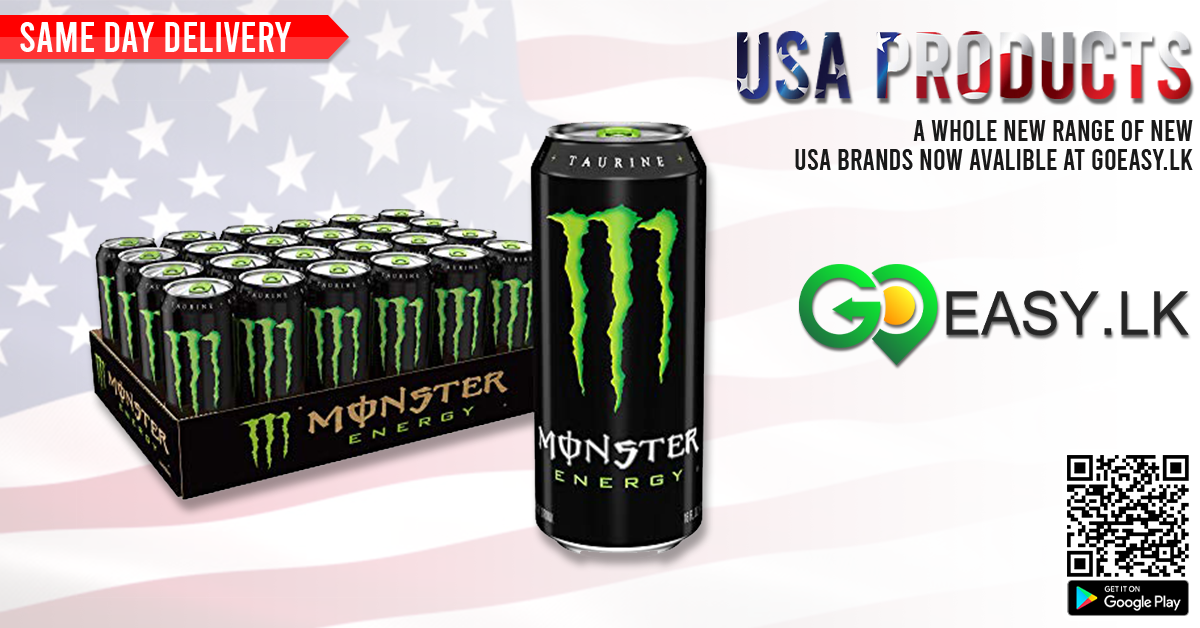
<style>
.page{position:relative;width:1200px;height:628px}
.page>*{position:absolute;margin:0}
.t1{font:41.7px "Bebas-Regular";color:#ffffff;text-transform:uppercase}
.t2{font:95.1px "Bebas-Regular";text-transform:uppercase}
.t3{font:29.2px/29.2px "Bebas-Regular";color:#191919}
</style>
<div class="page">
<p class="t1" style="left:20px;top:22px;width:272px;height:30px">Same Day Delivery</p>
<p class="t2" style="left:737px;top:31px;width:454px;height:68px">Usa Products</p>
<p class="t3" style="left:795px;top:120px;width:398px;height:50px;text-align:right">A whole new range of new<br>usa brands now avalible at Goeasy.lk</p>
</div>
